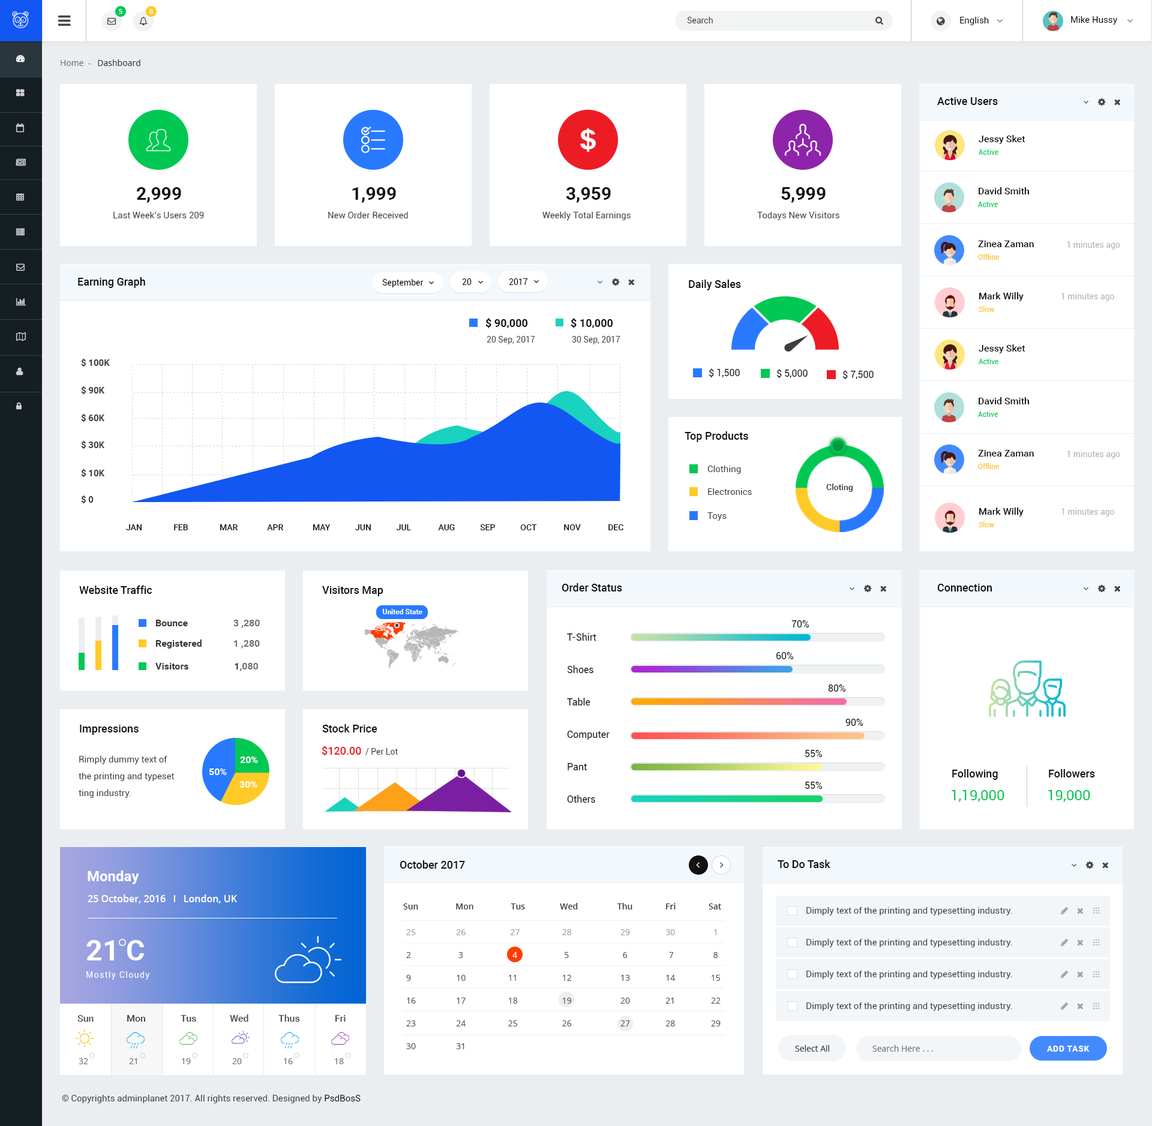
<style>
.page{position:relative;width:1152px;height:1126px;background:#ffffff}
.page>*{position:absolute;margin:0}
.t1{font:6.6px "OpenSans-Semibold";color:#ffffff}
.t2{font:8.4px "Roboto-Regular";color:#444444}
.t3{font:9px "Roboto-Regular";color:#111111}
.t4{font:8.4px "OpenSans";color:#333333}
.t5{font:8.4px "OpenSans";color:#707070}
.t6{font:10.8px "Roboto-Medium";color:#111111}
.t7{font:9.6px "Roboto-Medium";color:#111111}
.t8{font:7.2px "Roboto-Regular";color:#00c853}
.t9{font:18px "Roboto-Bold";color:#111111}
.t10{font:9px "Roboto-Regular";color:#444444}
.t11{font:8.4px "Roboto-Regular";color:#aeb3b4}
.t12{font:7.2px "Roboto-Regular";color:#fbc02d}
.t13{font:8.4px "Roboto-Regular";color:#000000}
.t14{font:10.8px "Roboto-Bold";color:#111111}
.t15{font:9px "Roboto-Bold";color:#444444}
.t16{font:9.6px "Roboto-Regular";color:#111111}
.t17{font:8.4px "Roboto-Medium";color:#333333}
.t18{font:8.4px "Roboto-Medium";color:#111111}
.t19{font:7.2px "Roboto-Bold";color:#ffffff}
.t20{font:9.6px "Roboto-Bold";color:#333333}
.t21{font:9.6px "Roboto-Bold";color:#707070}
.t22{font:9.6px/32.4px "Roboto-Regular";color:#111111}
.t23{font:10.8px "Roboto-Medium";color:#ed1c24}
.t24{font:9px/16.8px "Roboto-Regular";color:#444444}
.t25{font:9.6px "Roboto-Bold";color:#ffffff}
.t26{font:14.4px "Roboto-Regular";color:#00c853}
.t27{font:14.4px "Roboto-Bold";color:#ffffff}
.t28{font:9.6px "OpenSans-Semibold";color:#ffffff}
.t29{font:8.4px "OpenSans-Semibold";color:#333333}
.t30{font:8.4px/22.8px "OpenSans";color:#525252}
.t31{font:8.4px/22.8px "OpenSans";color:#9f9f9f}
.t32{font:8.4px/22.8px "OpenSans";color:#ffffff}
.t33{font:28.8px "Roboto-Bold";color:#ffffff}
.t34{font:8.4px "Roboto-Regular";letter-spacing:0.1em;color:#ffffff}
.t35{font:9.6px "Roboto-Medium";color:#444444}
.t36{font:8.4px "Roboto-Bold";letter-spacing:0.05em;color:#ffffff;text-transform:uppercase}
</style>
<div class="page">
<p class="t1" style="left:119px;top:9px;width:3px;height:5px">5</p>
<p class="t1" style="left:149px;top:9px;width:4px;height:5px">8</p>
<p class="t2" style="left:687px;top:17px;width:26px;height:6px">Search</p>
<p class="t3" style="left:960px;top:17px;width:29px;height:8px">English</p>
<p class="t3" style="left:1071px;top:16px;width:46px;height:9px">Mike Hussy</p>
<p class="t4" style="left:61px;top:59px;width:79px;height:7px"><span class="t5">Home  -   </span>Dashboard</p>
<p class="t6" style="left:937px;top:97px;width:61px;height:8px">Active Users</p>
<p class="t7" style="left:979px;top:135px;width:46px;height:9px">Jessy Sket</p>
<p class="t8" style="left:979px;top:149px;width:19px;height:6px">Active</p>
<p class="t9" style="left:137px;top:187px;width:44px;height:16px">2,999</p>
<p class="t9" style="left:352px;top:187px;width:44px;height:16px">1,999</p>
<p class="t9" style="left:566px;top:187px;width:45px;height:16px">3,959</p>
<p class="t9" style="left:781px;top:187px;width:45px;height:16px">5,999</p>
<p class="t7" style="left:979px;top:187px;width:51px;height:7px">David Smith</p>
<p class="t8" style="left:978px;top:201px;width:20px;height:6px">Active</p>
<p class="t10" style="left:113px;top:212px;width:91px;height:6px">Last Week’s Users 209</p>
<p class="t10" style="left:328px;top:212px;width:80px;height:6px">New Order Received</p>
<p class="t10" style="left:542px;top:212px;width:89px;height:8px">Weekly Total Earnings</p>
<p class="t10" style="left:757px;top:212px;width:82px;height:8px">Todays New Visitors</p>
<p class="t7" style="left:978px;top:241px;width:56px;height:6px">Zinea Zaman</p>
<p class="t11" style="left:1067px;top:241px;width:53px;height:9px">1 minutes ago</p>
<p class="t12" style="left:978px;top:254px;width:21px;height:6px">Offline</p>
<p class="t6" style="left:78px;top:277px;width:67px;height:11px">Earning Graph</p>
<p class="t13" style="left:382px;top:279px;width:42px;height:8px">September</p>
<p class="t13" style="left:462px;top:278px;width:10px;height:7px">20</p>
<p class="t13" style="left:509px;top:278px;width:19px;height:7px">2017</p>
<p class="t6" style="left:689px;top:280px;width:52px;height:10px">Daily Sales</p>
<p class="t7" style="left:979px;top:292px;width:45px;height:9px">Mark Willy</p>
<p class="t11" style="left:1061px;top:293px;width:53px;height:8px">1 minutes ago</p>
<p class="t14" style="left:485px;top:318px;width:42px;height:10px">$ 90,000</p>
<p class="t14" style="left:571px;top:318px;width:42px;height:10px">$ 10,000</p>
<p class="t12" style="left:979px;top:306px;width:16px;height:6px">Slow</p>
<p class="t2" style="left:487px;top:336px;width:48px;height:8px">20 Sep, 2017</p>
<p class="t2" style="left:572px;top:336px;width:48px;height:8px">30 Sep, 2017</p>
<p class="t7" style="left:979px;top:344px;width:46px;height:9px">Jessy Sket</p>
<p class="t15" style="left:81px;top:358px;width:29px;height:9px">$ 100K</p>
<p class="t8" style="left:979px;top:358px;width:19px;height:6px">Active</p>
<p class="t16" style="left:709px;top:368px;width:31px;height:9px">$ 1,500</p>
<p class="t16" style="left:777px;top:369px;width:31px;height:9px">$ 5,000</p>
<p class="t16" style="left:843px;top:370px;width:31px;height:9px">$ 7,500</p>
<p class="t15" style="left:81px;top:386px;width:24px;height:9px">$ 90K</p>
<p class="t7" style="left:979px;top:397px;width:51px;height:7px">David Smith</p>
<p class="t15" style="left:81px;top:413px;width:24px;height:9px">$ 60K</p>
<p class="t8" style="left:978px;top:411px;width:20px;height:6px">Active</p>
<p class="t6" style="left:685px;top:431px;width:63px;height:11px">Top Products</p>
<p class="t15" style="left:81px;top:440px;width:24px;height:9px">$ 30K</p>
<p class="t7" style="left:978px;top:450px;width:56px;height:7px">Zinea Zaman</p>
<p class="t11" style="left:1067px;top:451px;width:53px;height:8px">1 minutes ago</p>
<p class="t15" style="left:81px;top:469px;width:24px;height:9px">$ 10K</p>
<p class="t10" style="left:707px;top:466px;width:34px;height:8px">Clothing</p>
<p class="t12" style="left:978px;top:463px;width:21px;height:6px">Offline</p>
<p class="t17" style="left:826px;top:484px;width:27px;height:8px">Cloting</p>
<p class="t15" style="left:81px;top:495px;width:13px;height:9px">$ 0</p>
<p class="t10" style="left:708px;top:488px;width:44px;height:7px">Electronics</p>
<p class="t7" style="left:979px;top:508px;width:45px;height:9px">Mark Willy</p>
<p class="t11" style="left:1061px;top:508px;width:53px;height:9px">1 minutes ago</p>
<p class="t10" style="left:707px;top:512px;width:20px;height:9px">Toys</p>
<p class="t12" style="left:979px;top:521px;width:16px;height:6px">Slow</p>
<p class="t18" style="left:126px;top:524px;width:497px;height:6px">JAN               FEB               MAR              APR              MAY            JUN            JUL             AUG            SEP            OCT             NOV             DEC</p>
<p class="t6" style="left:79px;top:586px;width:73px;height:8px">Website Traffic</p>
<p class="t6" style="left:322px;top:586px;width:61px;height:10px">Visitors Map</p>
<p class="t6" style="left:562px;top:583px;width:60px;height:9px">Order Status</p>
<p class="t6" style="left:937px;top:584px;width:55px;height:8px">Connection</p>
<p class="t19" style="left:383px;top:609px;width:39px;height:5px">United State</p>
<p class="t20" style="left:156px;top:620px;width:104px;height:8px">Bounce                   <span class="t21">3 ,280</span></p>
<p class="t16" style="left:791px;top:620px;width:18px;height:8px">70%</p>
<p class="t20" style="left:156px;top:640px;width:104px;height:9px">Registered             <span class="t21">1 ,280</span></p>
<p class="t22" style="left:567px;top:633px;width:43px;height:170px">T-Shirt<br>Shoes<br>Table<br>Computer<br>Pant<br>Others</p>
<p class="t16" style="left:776px;top:652px;width:18px;height:7px">60%</p>
<p class="t20" style="left:155px;top:663px;width:103px;height:8px">Visitors                   1<span class="t21">,080</span></p>
<p class="t16" style="left:828px;top:685px;width:18px;height:7px">80%</p>
<p class="t6" style="left:80px;top:725px;width:59px;height:10px">Impressions</p>
<p class="t6" style="left:322px;top:724px;width:55px;height:9px">Stock Price</p>
<p class="t16" style="left:845px;top:719px;width:18px;height:7px">90%</p>
<p class="t23" style="left:322px;top:746px;width:39px;height:10px">$120.00</p>
<p class="t2" style="left:365px;top:748px;width:33px;height:7px">/ Per Lot</p>
<p class="t16" style="left:805px;top:750px;width:18px;height:7px">55%</p>
<p class="t24" style="left:79px;top:756px;width:96px;height:42px">Rimply dummy text of <br>the printing and typeset<br>ting industry.</p>
<p class="t25" style="left:240px;top:757px;width:18px;height:6px">20%</p>
<p class="t25" style="left:209px;top:769px;width:18px;height:6px">50%</p>
<p class="t6" style="left:952px;top:769px;width:46px;height:11px">Following</p>
<p class="t6" style="left:1049px;top:769px;width:46px;height:9px">Followers</p>
<p class="t25" style="left:239px;top:781px;width:18px;height:7px">30%</p>
<p class="t16" style="left:805px;top:782px;width:18px;height:7px">55%</p>
<p class="t26" style="left:952px;top:790px;width:52px;height:12px">1,19,000</p>
<p class="t26" style="left:1048px;top:790px;width:42px;height:12px">19,000</p>
<p class="t6" style="left:400px;top:860px;width:65px;height:9px">October 2017</p>
<p class="t6" style="left:778px;top:860px;width:52px;height:8px">To Do Task</p>
<p class="t27" style="left:88px;top:871px;width:51px;height:13px">Monday</p>
<p class="t28" style="left:88px;top:895px;width:149px;height:9px">25 October, 2016   I   London, UK</p>
<p class="t29" style="left:403px;top:903px;width:318px;height:7px">Sun                 Mon                 Tus                Wed                  Thu               Fri               Sat</p>
<p class="t10" style="left:806px;top:907px;width:206px;height:9px">Dimply text of the printing and typesetting industry.</p>
<p class="t30" style="left:406px;top:929px;width:315px;height:120px"><span class="t31">25              26                   27             28                    29           30             1<br></span>2               3                    <span class="t32">4</span>              5                     6                   7             8<br>9              10                  11             12                    13           14           15<br>16              17                  18             19                    20           21            22<br>23              24                  25             26                    27           28            29<br>30              31</p>
<p class="t33" style="left:86px;top:940px;width:58px;height:21px">21 C</p>
<p class="t10" style="left:806px;top:939px;width:206px;height:8px">Dimply text of the printing and typesetting industry.</p>
<p class="t34" style="left:86px;top:971px;width:63px;height:9px">Mostly Cloudy</p>
<p class="t10" style="left:806px;top:971px;width:206px;height:8px">Dimply text of the printing and typesetting industry.</p>
<p class="t10" style="left:806px;top:1003px;width:206px;height:8px">Dimply text of the printing and typesetting industry.</p>
<p class="t35" style="left:77px;top:1015px;width:17px;height:7px">Sun</p>
<p class="t35" style="left:127px;top:1015px;width:19px;height:7px">Mon</p>
<p class="t35" style="left:181px;top:1015px;width:15px;height:7px">Tus</p>
<p class="t35" style="left:230px;top:1015px;width:18px;height:7px">Wed</p>
<p class="t35" style="left:278px;top:1015px;width:22px;height:7px">Thus</p>
<p class="t35" style="left:335px;top:1015px;width:11px;height:7px">Fri</p>
<p class="t4" style="left:795px;top:1045px;width:34px;height:7px">Select All</p>
<p class="t5" style="left:872px;top:1045px;width:61px;height:7px">Search Here . . .</p>
<p class="t36" style="left:1047px;top:1046px;width:43px;height:6px">Add Task</p>
<p class="t5" style="left:79px;top:1058px;width:9px;height:6px">32</p>
<p class="t5" style="left:129px;top:1058px;width:8px;height:6px">21</p>
<p class="t5" style="left:182px;top:1058px;width:9px;height:6px">19</p>
<p class="t5" style="left:232px;top:1058px;width:10px;height:6px">20</p>
<p class="t5" style="left:284px;top:1058px;width:9px;height:6px">16</p>
<p class="t5" style="left:335px;top:1058px;width:9px;height:6px">18</p>
<p class="t10" style="left:62px;top:1095px;width:299px;height:8px">© Copyrights adminplanet 2017. All rights reserved. Designed by <span class="t3">PsdBosS</span></p>
</div>
